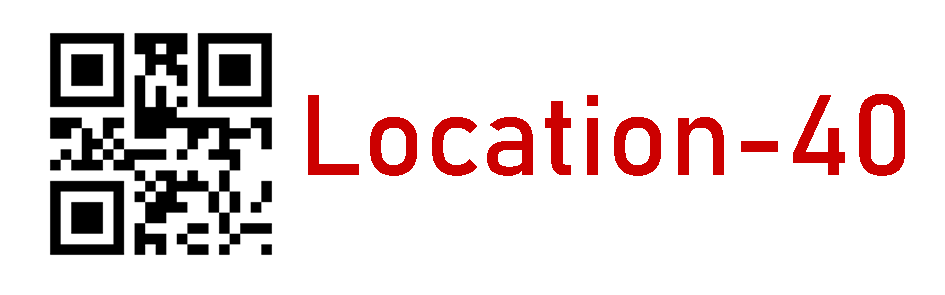
<style>
.page{position:relative;width:945px;height:295px;background:#ffffff}
.page>*{position:absolute;margin:0}
.t1{font:113.4px "Bahnschrift";color:#cc0000}
</style>
<div class="page">
<p class="t1" style="left:308px;top:94px;width:597px;height:82px">Location-40</p>
</div>
